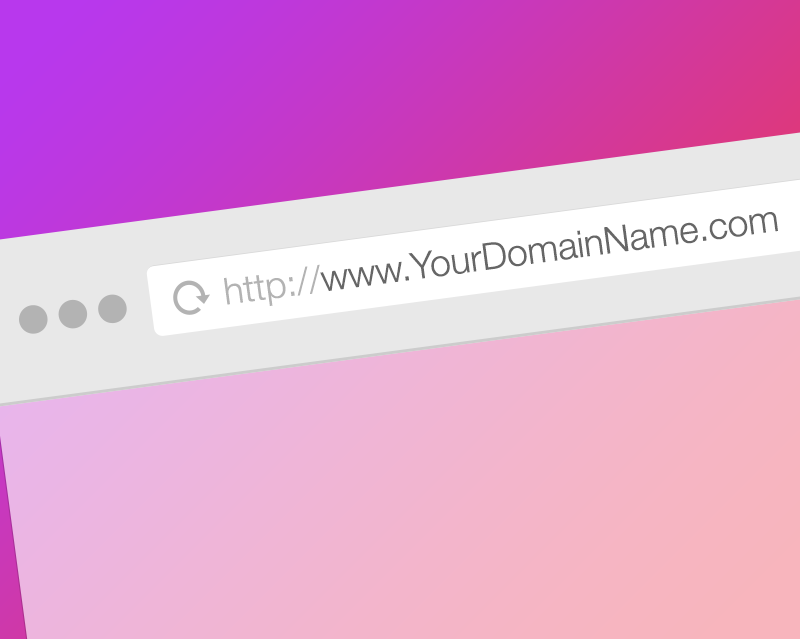
<style>
.page{position:relative;width:800px;height:639px}
.page>*{position:absolute;margin:0}
.t1{font:37.1px "HelveticaNeue-Light";color:#666666}
.t2{font:37.1px "HelveticaNeue-Light";color:#b3b3b3}
</style>
<div class="page">
<p class="t1" style="left:224px;top:212px;width:554px;height:94px;rotate:-8deg"><span class="t2">http://</span>www.YourDomainName.com</p>
</div>
